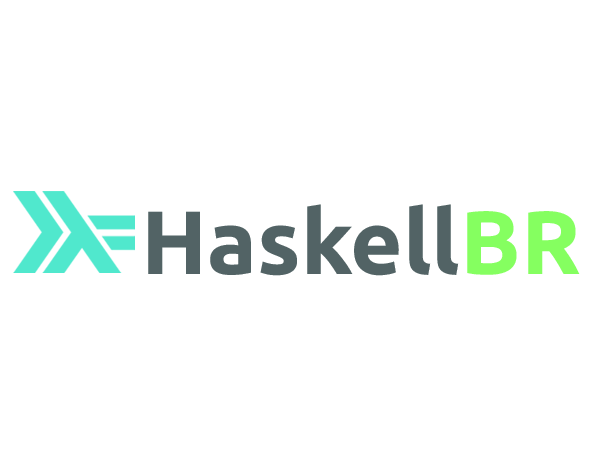
<style>
.page{position:relative;width:591px;height:472px;background:#ffffff}
.page>*{position:absolute;margin:0}
.t1{font:89.7px "Ubuntu-Bold";color:#526364}
.t2{font:89.7px "Ubuntu-Bold";color:#85ff60}
</style>
<div class="page">
<p class="t1" style="left:148px;top:204px;width:432px;height:72px">Haskell<span class="t2">BR</span></p>
</div>
